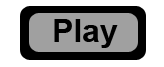
<style>
.page{position:relative;width:164px;height:67px;background:#ffffff}
.page>*{position:absolute;margin:0}
.t1{font:32px "Arial-BoldMT";color:#000000}
</style>
<div class="page">
<p class="t1" style="left:54px;top:19px;width:64px;height:29px">Play</p>
</div>
